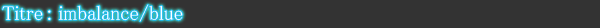
<style>
.page{position:relative;width:600px;height:28px;background:#333333}
.page>*{position:absolute;margin:0}
.t1{font:20px "MS-PMincho";color:#ffffff}
</style>
<div class="page">
<p class="t1" style="left:2px;top:4px;width:181px;height:18px">Titre : imbalance/blue</p>
</div>
